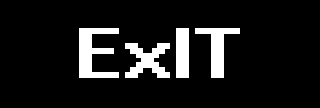
<style>
.page{position:relative;width:320px;height:108px;background:#000000}
.page>*{position:absolute;margin:0}
.t1{font:62.5px "System";letter-spacing:0.04em;color:#ffffff;font-weight:bold;scale:1.1 1}
</style>
<div class="page">
<p class="t1" style="left:79px;top:28px;width:161px;height:50px">ExIT</p>
</div>
